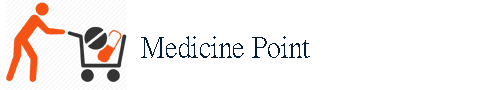
<style>
.page{position:relative;width:500px;height:90px;background:#ffffff}
.page>*{position:absolute;margin:0}
.t1{font:29.2px "PMingLiU-ExtB";color:#051d36}
</style>
<div class="page">
<p class="t1" style="left:141px;top:36px;width:169px;height:22px">Medicine Point</p>
</div>
